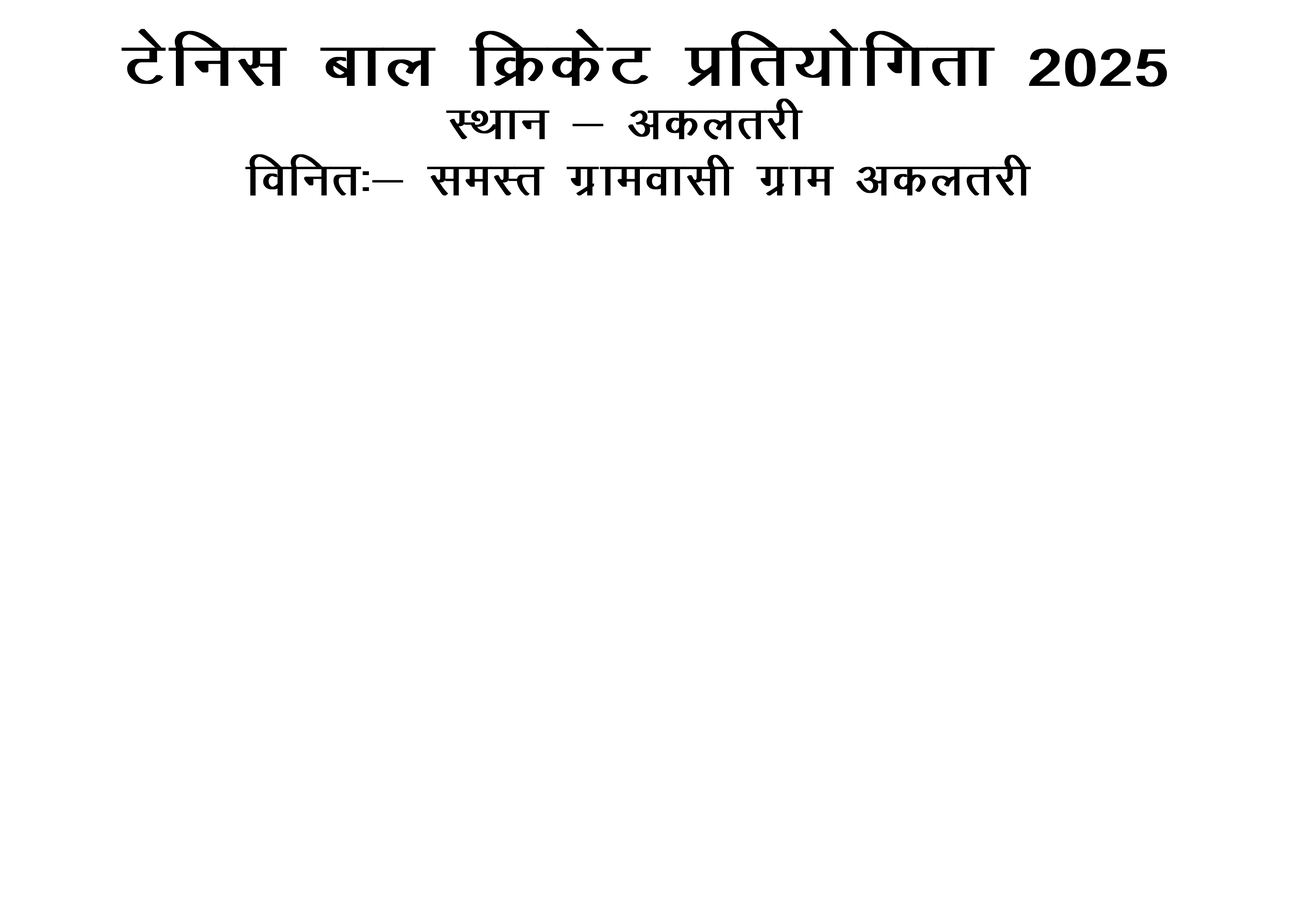
<style>
.page{position:relative;width:1299px;height:918px;background:#ffffff}
.page>*{position:absolute;margin:0}
.t1{font:74px "KrutiDev011";color:#000000;scale:1.12 1}
.t2{font:55.5px "KrutiDev011";color:#000000}
</style>
<div class="page">
<p class="t1" style="left:121px;top:29px;width:1046px;height:58px">Vsful cky fØdsV çfr;ksfxrk 2025</p>
<p class="t2" style="left:446px;top:98px;width:357px;height:42px">LFkku &amp; vdyrjh</p>
<p class="t2" style="left:245px;top:154px;width:786px;height:42px">fofur%&amp; leLr xzkeoklh xzke vdyrjh</p>
</div>
